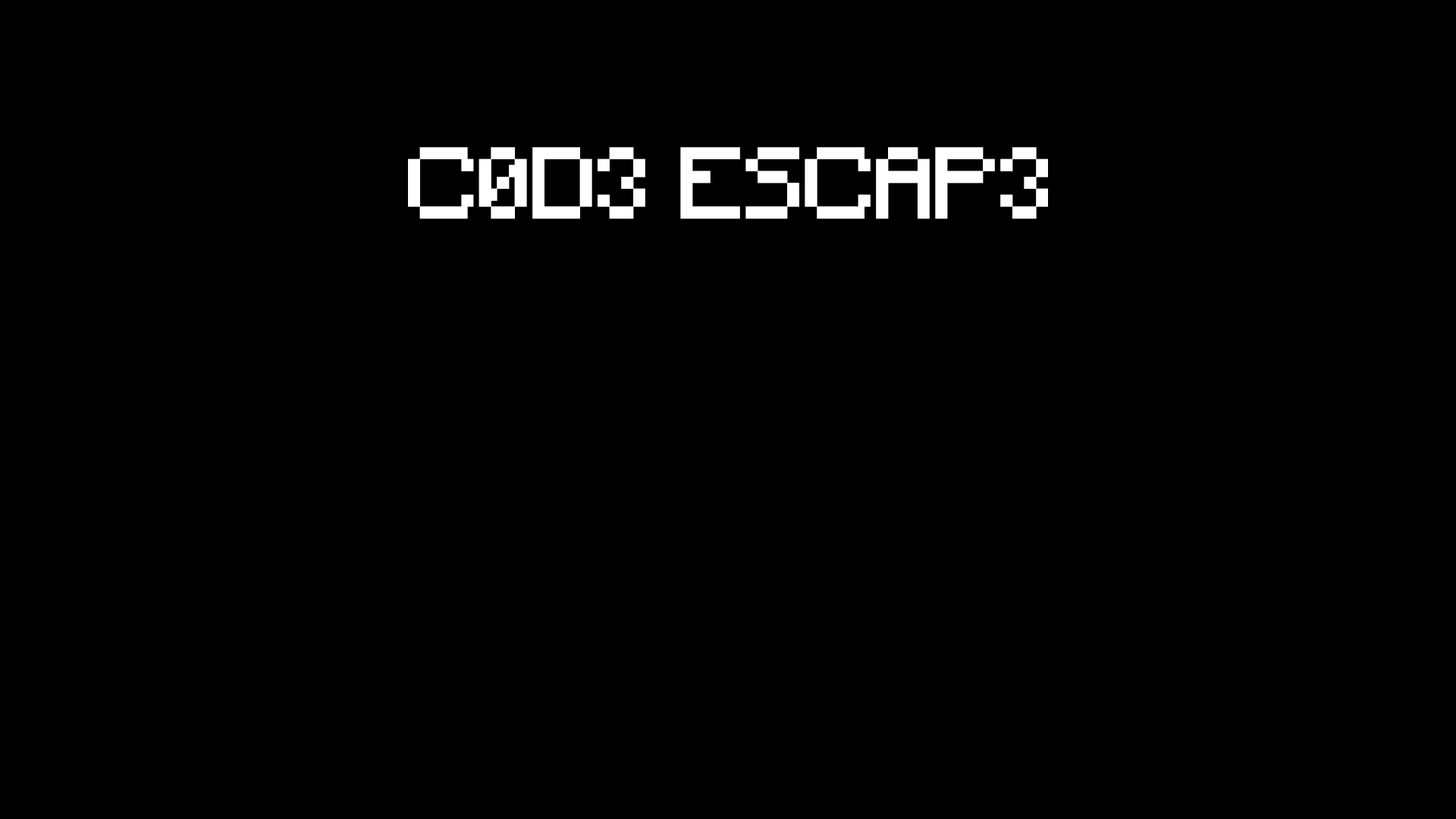
<style>
.page{position:relative;width:1456px;height:819px;background:#000000}
.page>*{position:absolute;margin:0}
.t1{font:94.8px "Minecraft";color:#ffffff}
</style>
<div class="page">
<p class="t1" style="left:408px;top:147px;width:640px;height:72px">C0D3 ESCAP3</p>
</div>
